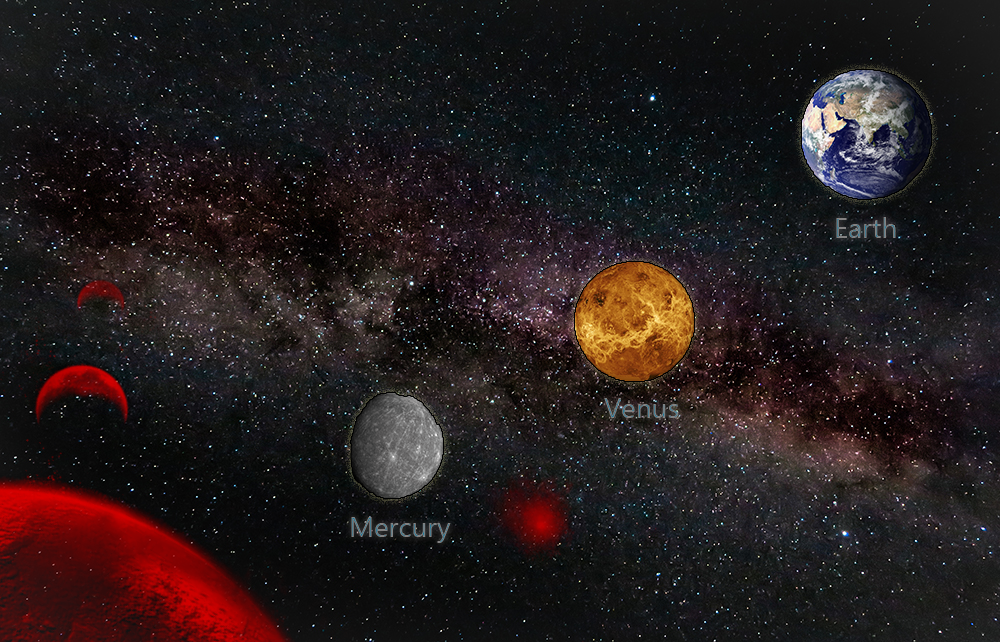
<style>
.page{position:relative;width:1000px;height:642px}
.page>*{position:absolute;margin:0}
.t1{font:28px "SegoeUIHistoric"}
</style>
<div class="page">
<p class="t1" style="left:836px;top:217px;width:60px;height:21px">Earth</p>
<p class="t1" style="left:604px;top:398px;width:75px;height:20px">Venus</p>
<p class="t1" style="left:351px;top:517px;width:100px;height:26px">Mercury</p>
</div>
